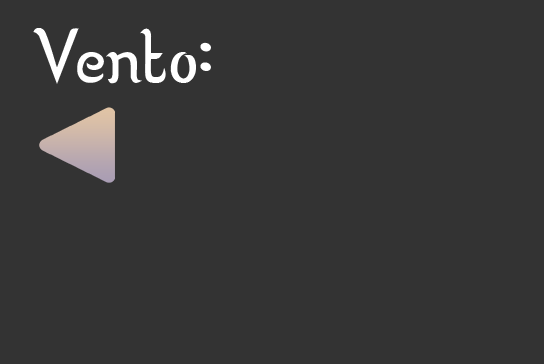
<style>
.page{position:relative;width:544px;height:364px;background:#333333}
.page>*{position:absolute;margin:0}
.t1{font:100px "Wizzta";color:#ffffff}
</style>
<div class="page">
<p class="t1" style="left:33px;top:28px;width:178px;height:56px">Vento:</p>
</div>
